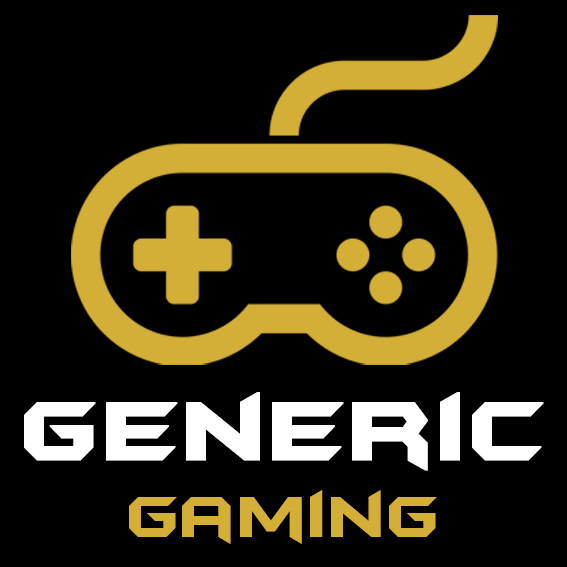
<style>
.page{position:relative;width:567px;height:567px;background:#000000}
.page>*{position:absolute;margin:0}
.t1{font:97.5px "BatmanForeverAlternate";color:#ffffff;font-weight:bold}
.t2{font:67.7px "BatmanForeverAlternate";color:#d4af37}
</style>
<div class="page">
<p class="t1" style="left:24px;top:392px;width:520px;height:79px">Generic</p>
<p class="t2" style="left:129px;top:490px;width:308px;height:54px">Gaming</p>
</div>
